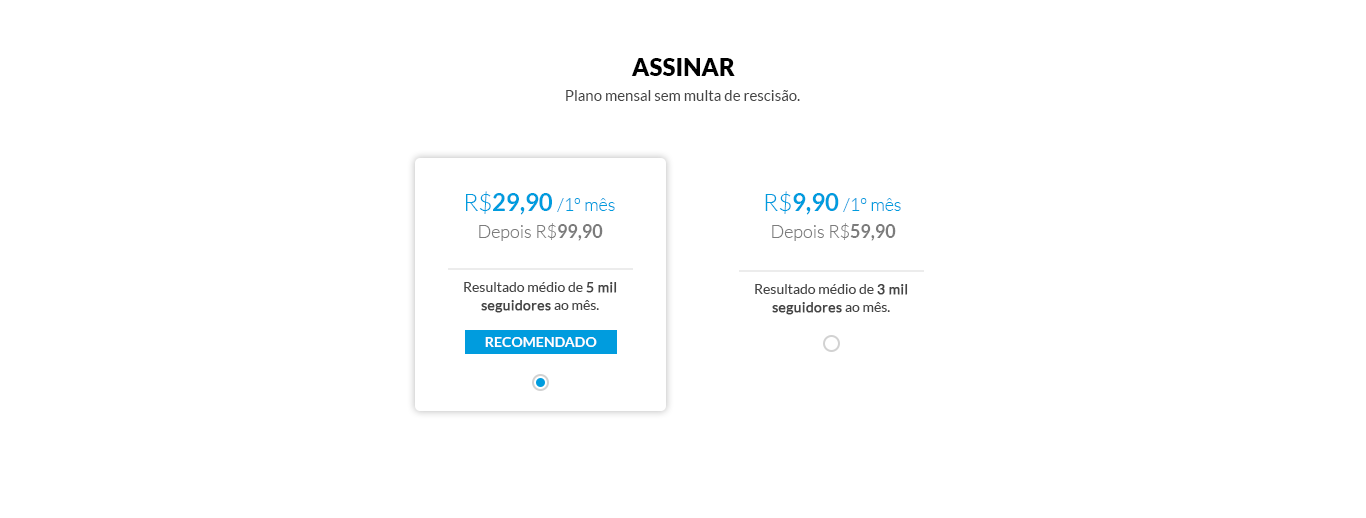
<style>
.page{position:relative;width:1366px;height:518px;background:#ffffff}
.page>*{position:absolute;margin:0}
.t1{font:24px "Lato-Black";color:#000000}
.t2{font:15px "Lato-Regular";color:#454545}
.t3{font:18px "Lato-Light";color:#009cde}
.t4{font:23.8px "Lato-Light";color:#009cde}
.t5{font:23.8px "Lato-Bold";color:#009cde}
.t6{font:18px "Lato-Light";color:#7c7c7c}
.t7{font:18px "Lato-Bold";color:#7c7c7c}
.t8{font:14px/17.2px "Lato-Regular";color:#454545}
.t9{font:14px/17.2px "Lato-Regular";color:#454545;font-weight:bold}
.t10{font:14.2px "Lato-Bold";color:#ffffff;text-transform:uppercase}
</style>
<div class="page">
<p class="t1" style="left:631px;top:58px;width:104px;height:18px">ASSINAR</p>
<p class="t2" style="left:566px;top:90px;width:234px;height:11px">Plano mensal sem multa de rescisão.</p>
<p class="t3" style="left:466px;top:191px;width:149px;height:24px"><span class="t4">R$</span><span class="t5">29,90 </span>/1º mês</p>
<p class="t3" style="left:765px;top:191px;width:136px;height:24px"><span class="t4">R$</span><span class="t5">9,90 </span>/1º mês</p>
<p class="t6" style="left:479px;top:223px;width:124px;height:18px">Depois R$<span class="t7">99,90</span></p>
<p class="t6" style="left:772px;top:223px;width:124px;height:18px">Depois R$<span class="t7">59,90</span></p>
<p class="t8" style="left:464px;top:282px;width:153px;height:31px;text-align:center">Resultado médio de <span class="t9">5 mil<br>seguidores</span> ao mês.</p>
<p class="t8" style="left:755px;top:284px;width:153px;height:31px;text-align:center">Resultado médio de <span class="t9">3 mil<br>seguidores</span> ao mês.</p>
<p class="t10" style="left:485px;top:337px;width:112px;height:10px">recomendado</p>
</div>
